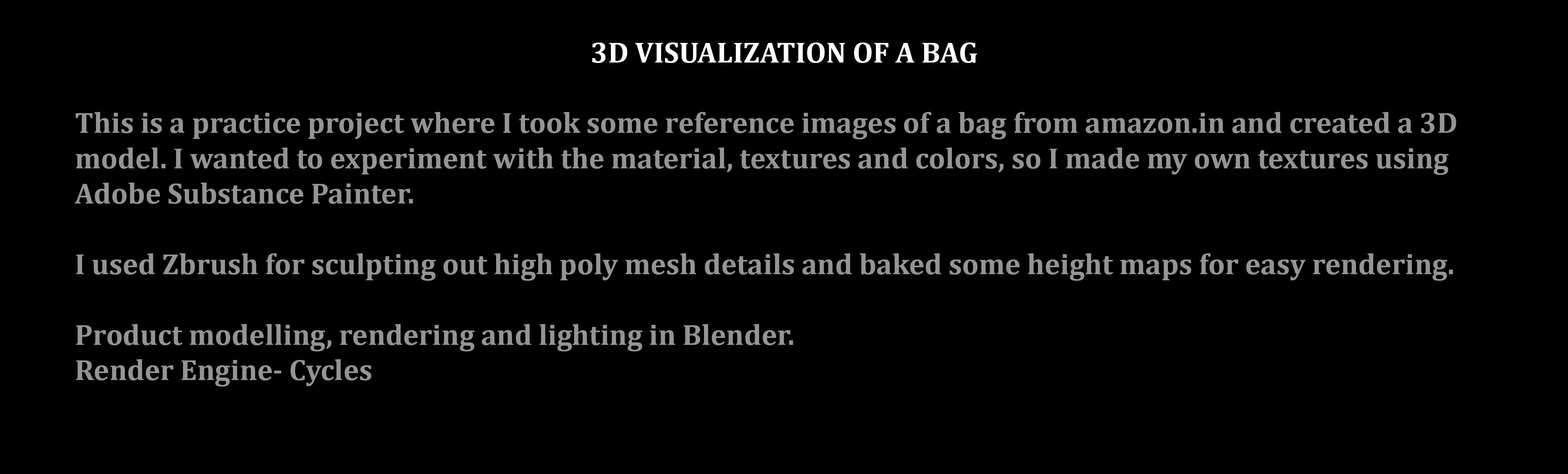
<style>
.page{position:relative;width:1568px;height:474px;background:#000000}
.page>*{position:absolute;margin:0}
.t1{font:29.4px "Cambria-Bold";color:#949494}
.t2{font:29.4px "Cambria-Bold";color:#ffffff}
</style>
<div class="page">
<p class="t1" style="left:74px;top:42px;width:1383px;height:344px;text-align:center"><span class="t2">3D VISUALIZATION OF A BAG<br><br></span>This is a practice project where I took some reference images of a bag from amazon.in and created a 3D model. I wanted to experiment with the material, textures and colors, so I made my own textures using Adobe Substance Painter. <br><br>I used Zbrush for sculpting out high poly mesh details and baked some height maps for easy rendering.<br><br>Product modelling, rendering and lighting in Blender.<br>Render Engine- Cycles</p>
</div>
